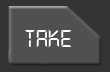
<style>
.page{position:relative;width:110px;height:72px;background:#505050}
.page>*{position:absolute;margin:0}
.t1{font:26px "DS-Digital";letter-spacing:-0.025em;color:#ffffff}
</style>
<div class="page">
<p class="t1" style="left:25px;top:29px;width:47px;height:19px">take</p>
</div>
